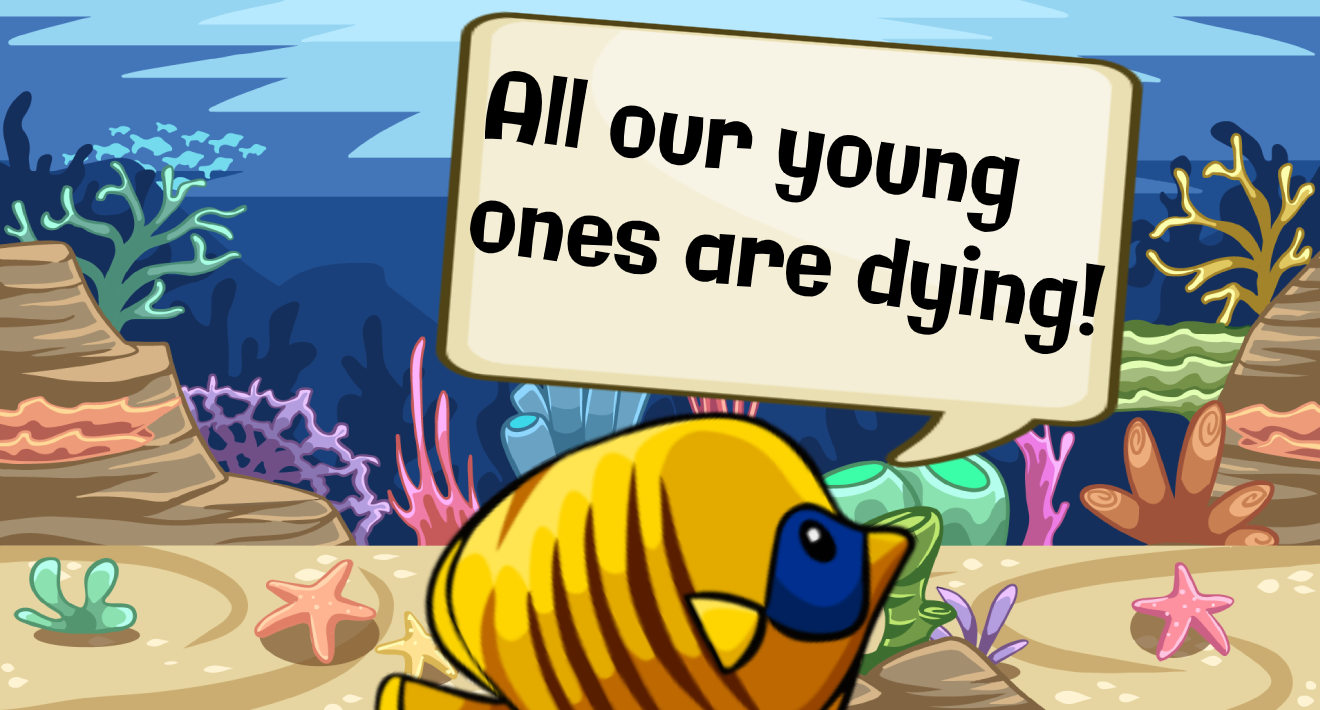
<style>
.page{position:relative;width:1320px;height:710px}
.page>*{position:absolute;margin:0}
.t1{font:94.3px "Galindo-Regular";color:#000000;scale:0.85 1}
</style>
<div class="page">
<p class="t1" style="left:470px;top:71px;width:636px;height:283px;rotate:8deg">All our young   <br>ones are dying!</p>
</div>
